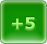
<style>
.page{position:relative;width:47px;height:44px}
.page>*{position:absolute;margin:0}
.t1{font:16px "Verdana-Bold";color:#acff68}
</style>
<div class="page">
<p class="t1" style="left:12px;top:17px;width:23px;height:13px">+5</p>
</div>
